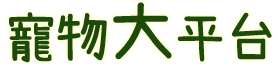
<style>
.page{position:relative;width:279px;height:73px;background:#ffffff}
.page>*{position:absolute;margin:0}
.t1{font:54px "SetoFont";letter-spacing:-0.088em;color:#1d4a09;font-weight:bold}
.t2{font:72px "SetoFont";letter-spacing:-0.088em;color:#1d4a09;font-weight:bold}
</style>
<div class="page">
<p class="t1" style="left:9px;top:2px;width:263px;height:61px">寵物<span class="t2">大</span>平台</p>
</div>
